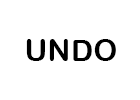
<style>
.page{position:relative;width:140px;height:100px;background:#ffffff}
.page>*{position:absolute;margin:0}
.t1{font:30px "ArialRoundedMTBold";letter-spacing:0.01em;color:#000000}
</style>
<div class="page">
<p class="t1" style="left:26px;top:39px;width:90px;height:22px">UNDO</p>
</div>
